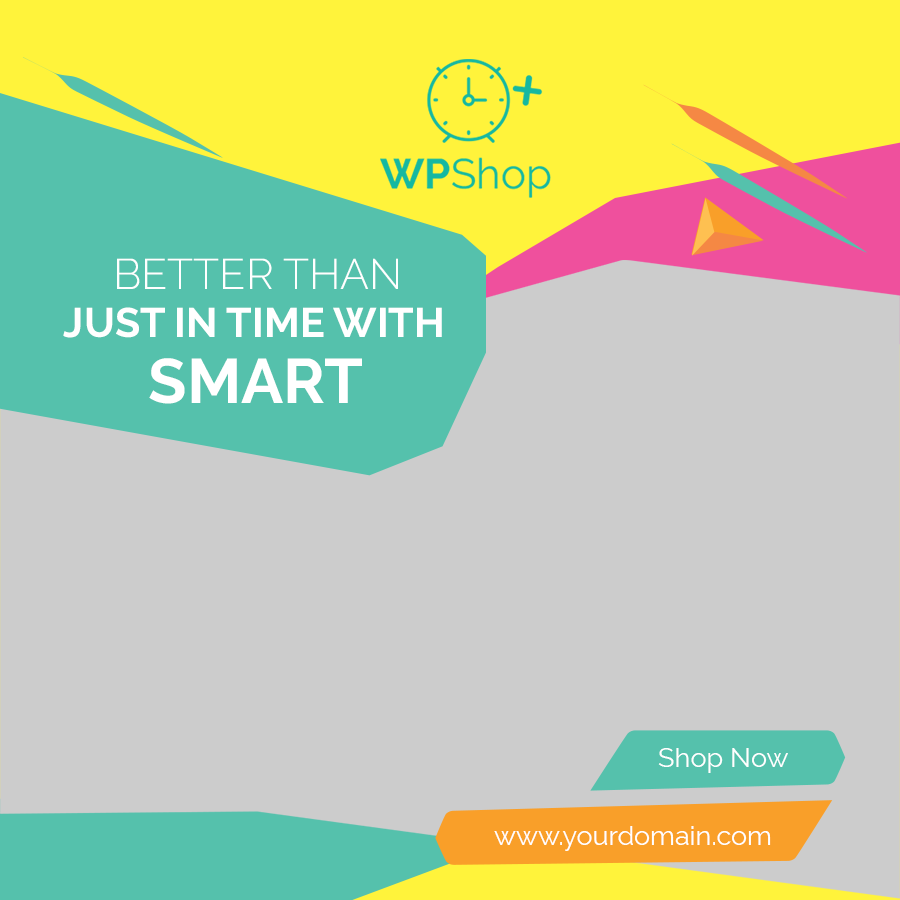
<style>
.page{position:relative;width:900px;height:900px;background:#cccccc}
.page>*{position:absolute;margin:0}
.t1{font:42.7px "Raleway-Light";color:#ffffff}
.t2{font:41.3px "Raleway-Bold";color:#ffffff}
.t3{font:62.7px "Raleway-Bold";color:#ffffff}
.t4{font:27.2px "Raleway-Regular";color:#ffffff}
.t5{font:27px "Raleway-Regular";color:#ffffff}
</style>
<div class="page">
<p class="t1" style="left:117px;top:258px;width:281px;height:31px">BETTER THAN</p>
<p class="t2" style="left:63px;top:307px;width:379px;height:31px">JUST IN TIME WITH</p>
<p class="t3" style="left:149px;top:358px;width:213px;height:46px">SMART</p>
<p class="t4" style="left:658px;top:748px;width:130px;height:25px">Shop Now</p>
<p class="t5" style="left:494px;top:826px;width:277px;height:25px">www.yourdomain.com</p>
</div>
